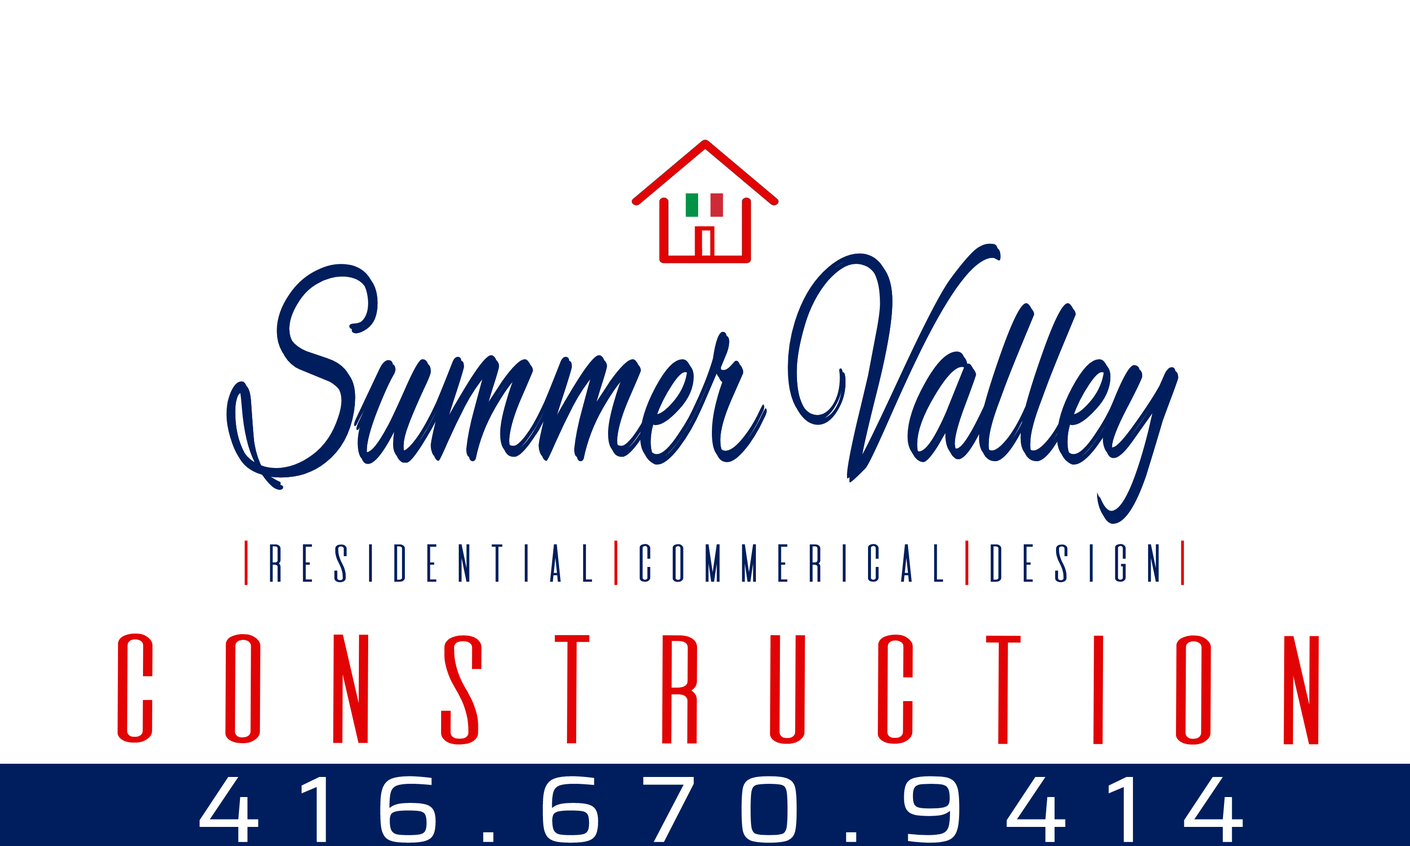
<style>
.page{position:relative;width:1410px;height:846px;background:#ffffff}
.page>*{position:absolute;margin:0}
.t1{font:308.1px "AlexBrush-Regular";color:#001e5d;scale:0.55 1}
.t2{font:46.7px "DeValencia-Regular";color:#001e5d;scale:1.2 1}
.t3{font:46.7px "DeValencia-Regular";color:#e20404;scale:1.2 1}
.t4{font:135.1px "DeValencia-Regular";color:#e20404;scale:1.36 1}
.t5{font:94.4px "Saira-Regular";letter-spacing:0.324em;color:#ffffff;scale:1.13 1}
</style>
<div class="page">
<p class="t1" style="left:226px;top:243px;width:950px;height:277px">Summer Valley</p>
<p class="t1" style="left:229px;top:247px;width:949px;height:277px">Summer Valley</p>
<p class="t1" style="left:229px;top:247px;width:949px;height:277px">Summer Valley</p>
<p class="t2" style="left:244px;top:540px;width:940px;height:45px"><span class="t3">|</span>RESIDENTIAL<span class="t3">|</span>COMMERICAL<span class="t3">|</span>DESIGN<span class="t3">|</span></p>
<p class="t4" style="left:117px;top:633px;width:1202px;height:112px">Construction</p>
<p class="t5" style="left:199px;top:776px;width:1044px;height:67px">416.670.9414</p>
</div>
